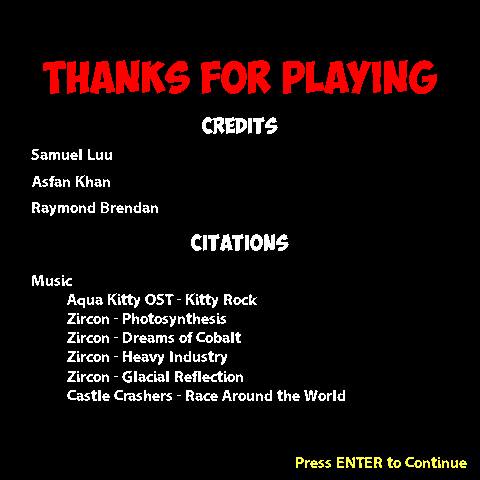
<style>
.page{position:relative;width:480px;height:480px;background:#000000}
.page>*{position:absolute;margin:0}
.t1{font:32px "ObelixPro";color:#ff0000}
.t2{font:16px "ObelixPro";color:#ffffff}
.t3{font:16px "LooseySans";color:#ffffff}
.t4{font:16px "LooseySans";color:#ffff40}
</style>
<div class="page">
<p class="t1" style="left:43px;top:60px;width:394px;height:34px">thanks for playing</p>
<p class="t2" style="left:202px;top:117px;width:76px;height:17px">CREDITS</p>
<p class="t3" style="left:31px;top:149px;width:81px;height:11px">Samuel Luu</p>
<p class="t3" style="left:32px;top:175px;width:78px;height:12px">Asfan Khan</p>
<p class="t3" style="left:32px;top:202px;width:126px;height:14px">Raymond Brendan</p>
<p class="t2" style="left:191px;top:234px;width:98px;height:17px">CITATIONS</p>
<p class="t3" style="left:32px;top:275px;width:313px;height:126px">Music<br> Aqua Kitty OST - Kitty Rock<br> Zircon - Photosynthesis<br> Zircon - Dreams of Cobalt<br> Zircon - Heavy Industry<br> Zircon - Glacial Reflection<br> Castle Crashers - Race Around the World</p>
<p class="t4" style="left:296px;top:457px;width:171px;height:11px">Press ENTER to Continue</p>
</div>
